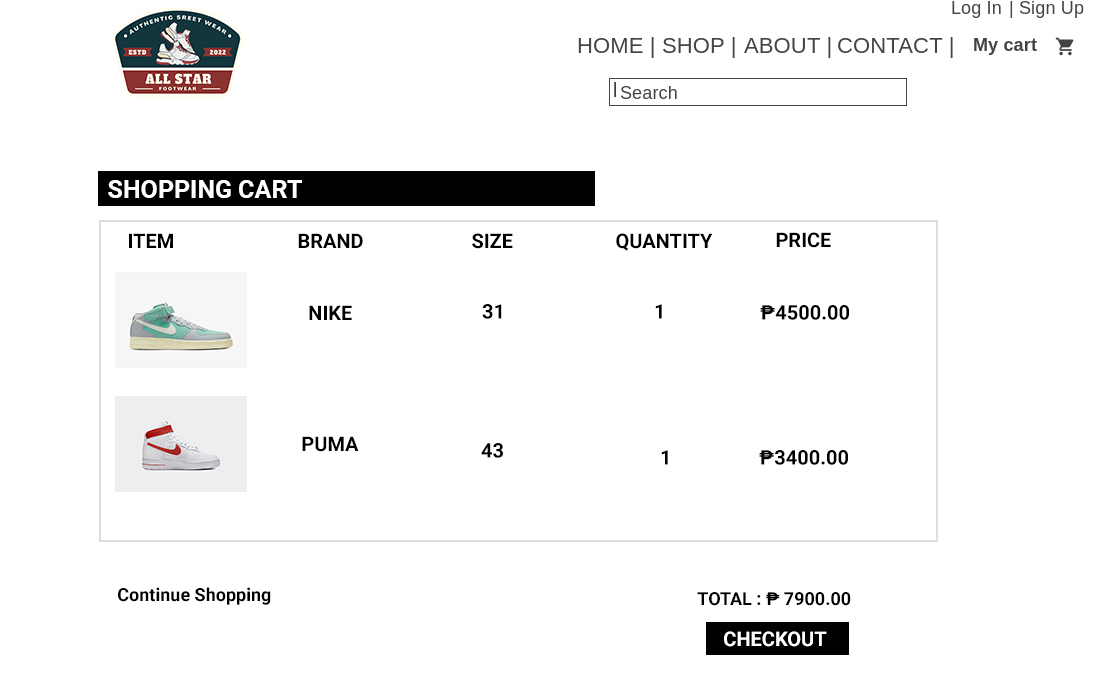
<style>
.page{position:relative;width:1098px;height:694px;background:#ffffff}
.page>*{position:absolute;margin:0}
.t1{font:25px "Roboto-Bold";color:#ffffff}
.t2{font:20px "Roboto-Bold";color:#000000}
.t3{font:18px "Roboto-Bold";color:#000000}
.t4{font:20px "Roboto-Bold";color:#ffffff}
</style>
<div class="page">
<p class="t1" style="left:108px;top:180px;width:194px;height:18px">SHOPPING CART</p>
<p class="t2" style="left:129px;top:233px;width:44px;height:15px">ITEM</p>
<p class="t2" style="left:298px;top:233px;width:65px;height:15px">BRAND</p>
<p class="t2" style="left:472px;top:233px;width:41px;height:16px">SIZE</p>
<p class="t2" style="left:616px;top:233px;width:97px;height:18px">QUANTITY</p>
<p class="t2" style="left:776px;top:232px;width:55px;height:16px">PRICE</p>
<p class="t2" style="left:309px;top:305px;width:43px;height:15px">NIKE</p>
<p class="t2" style="left:482px;top:304px;width:20px;height:15px">31</p>
<p class="t2" style="left:655px;top:304px;width:7px;height:15px">1</p>
<p class="t2" style="left:760px;top:305px;width:89px;height:15px">₱4500.00</p>
<p class="t2" style="left:302px;top:436px;width:57px;height:16px">PUMA</p>
<p class="t2" style="left:481px;top:443px;width:22px;height:15px">43</p>
<p class="t2" style="left:661px;top:450px;width:7px;height:15px">1</p>
<p class="t2" style="left:759px;top:450px;width:89px;height:15px">₱3400.00</p>
<p class="t3" style="left:118px;top:587px;width:153px;height:18px">Continue Shopping</p>
<p class="t3" style="left:697px;top:592px;width:154px;height:14px">TOTAL : ₱ 7900.00</p>
<p class="t4" style="left:724px;top:631px;width:103px;height:16px">CHECKOUT</p>
</div>
